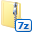
<style>
.page{position:relative;width:32px;height:32px;background:#ffffff}
.page>*{position:absolute;margin:0}
.t1{font:10px "Tahoma-Bold";color:#0064c8}
</style>
<div class="page">
<p class="t1" style="left:18px;top:22px;width:11px;height:7px">7z</p>
</div>
